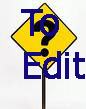
<style>
.page{position:relative;width:86px;height:109px}
.page>*{position:absolute;margin:0}
.t1{font:36px "Tahoma";color:#14097d;font-weight:bold}
</style>
<div class="page">
<p class="t1" style="left:21px;top:9px;width:64px;height:70px">To<br>Edit</p>
</div>
